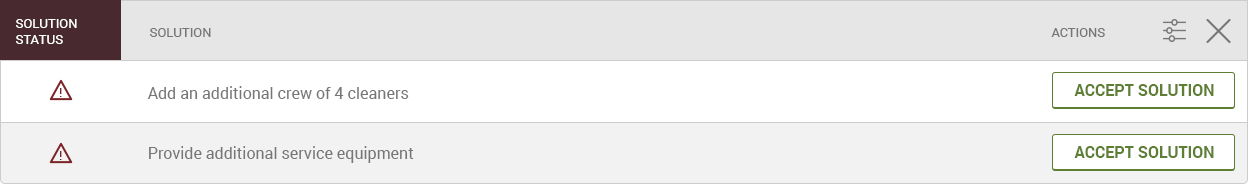
<style>
.page{position:relative;width:1248px;height:184px;background:#ffffff}
.page>*{position:absolute;margin:0}
.t1{font:13px "Roboto-Regular";color:#ffffff;text-transform:uppercase}
.t2{font:13px "Roboto-Regular";color:#767676;text-transform:uppercase}
.t3{font:13.3px "Roboto-Regular";color:#7b2326}
.t4{font:16px "Roboto-Regular";color:#767676}
.t5{font:16px "Roboto-Bold";color:#5d7e33;text-transform:uppercase}
</style>
<div class="page">
<p class="t1" style="left:16px;top:19px;width:61px;height:25px">Solution<br>Status</p>
<p class="t2" style="left:150px;top:28px;width:61px;height:9px">Solution</p>
<p class="t2" style="left:1051px;top:28px;width:54px;height:9px">Actions</p>
<p class="t3" style="left:60px;top:88px;width:2px;height:9px">!</p>
<p class="t4" style="left:147px;top:86px;width:262px;height:13px">Add an additional crew of 4 cleaners</p>
<p class="t5" style="left:1074px;top:84px;width:140px;height:12px">Accept Solution</p>
<p class="t4" style="left:149px;top:146px;width:265px;height:17px">Provide additional service equipment</p>
<p class="t5" style="left:1074px;top:146px;width:140px;height:12px">Accept Solution</p>
<p class="t3" style="left:60px;top:151px;width:2px;height:9px">!</p>
</div>
